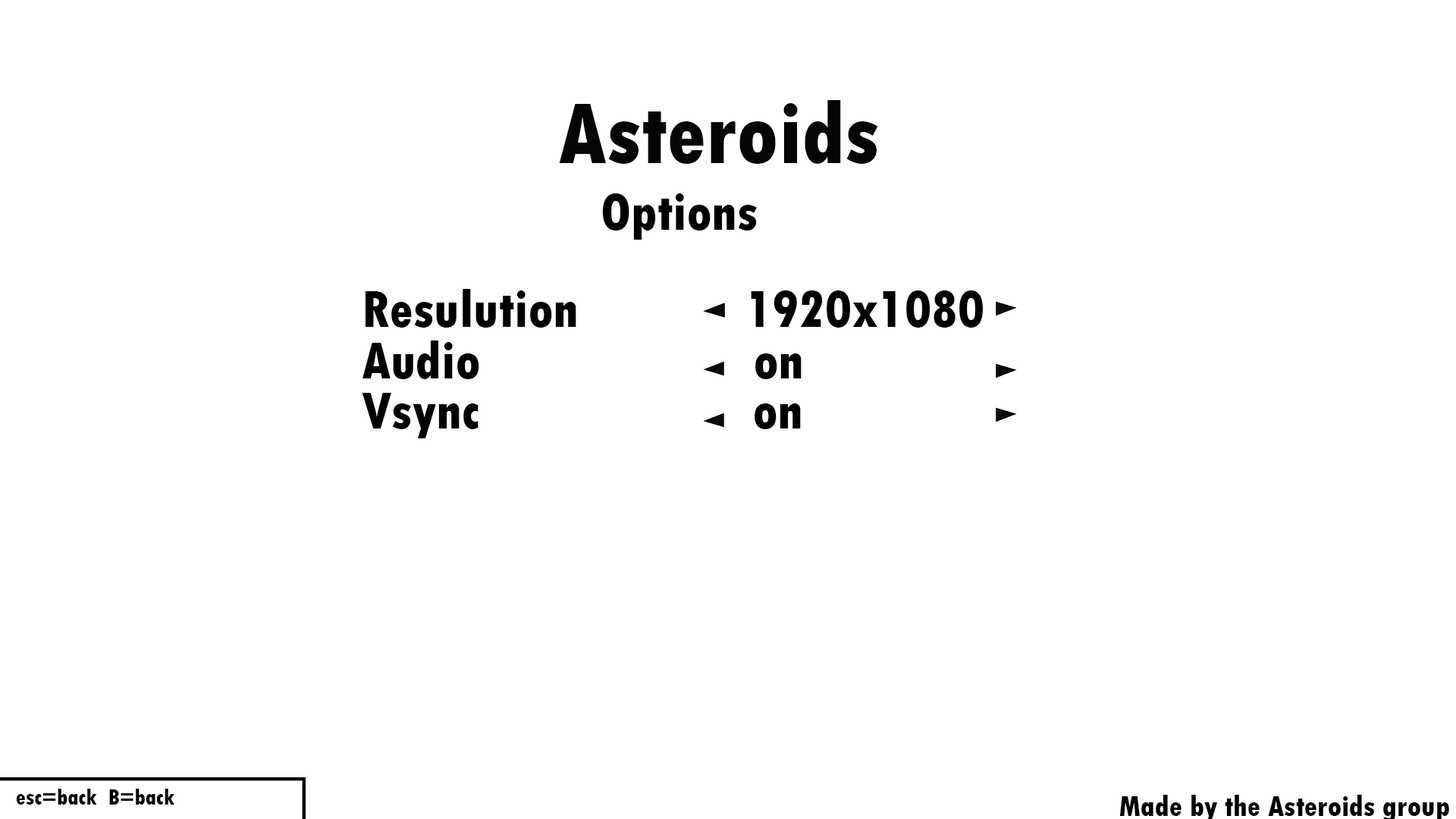
<style>
.page{position:relative;width:1456px;height:819px;background:#ffffff}
.page>*{position:absolute;margin:0}
.t1{font:91px "TwCenMT-CondensedExtraBold";color:#000000}
.t2{font:54.6px "TwCenMT-CondensedExtraBold";color:#000000}
.t3{font:22.7px "TwCenMT-CondensedExtraBold";color:#000000}
</style>
<div class="page">
<p class="t1" style="left:559px;top:100px;width:319px;height:64px">Asteroids</p>
<p class="t2" style="left:602px;top:193px;width:155px;height:47px">Options</p>
<p class="t2" style="left:366px;top:289px;width:210px;height:39px">Resulution</p>
<p class="t2" style="left:751px;top:290px;width:232px;height:38px">1920x1080</p>
<p class="t2" style="left:362px;top:340px;width:117px;height:39px">Audio</p>
<p class="t2" style="left:755px;top:353px;width:47px;height:26px">on</p>
<p class="t2" style="left:362px;top:393px;width:117px;height:45px">Vsync</p>
<p class="t2" style="left:755px;top:403px;width:46px;height:26px">on</p>
<p class="t3" style="left:16px;top:789px;width:158px;height:16px">esc=back  B=back</p>
</div>
